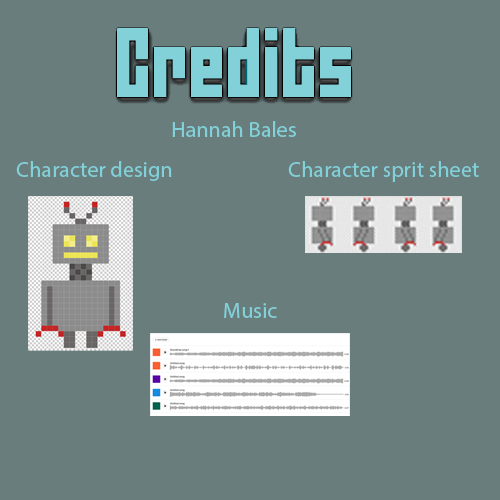
<style>
.page{position:relative;width:500px;height:500px;background:#697d7d}
.page>*{position:absolute;margin:0}
.t1{font:22.2px "MyriadPro-Regular";color:#82d0d8}
</style>
<div class="page">
<p class="t1" style="left:172px;top:121px;width:124px;height:16px">Hannah Bales</p>
<p class="t1" style="left:16px;top:161px;width:156px;height:20px">Character design</p>
<p class="t1" style="left:288px;top:161px;width:191px;height:21px">Character sprit sheet</p>
<p class="t1" style="left:224px;top:303px;width:53px;height:15px">Music</p>
</div>
